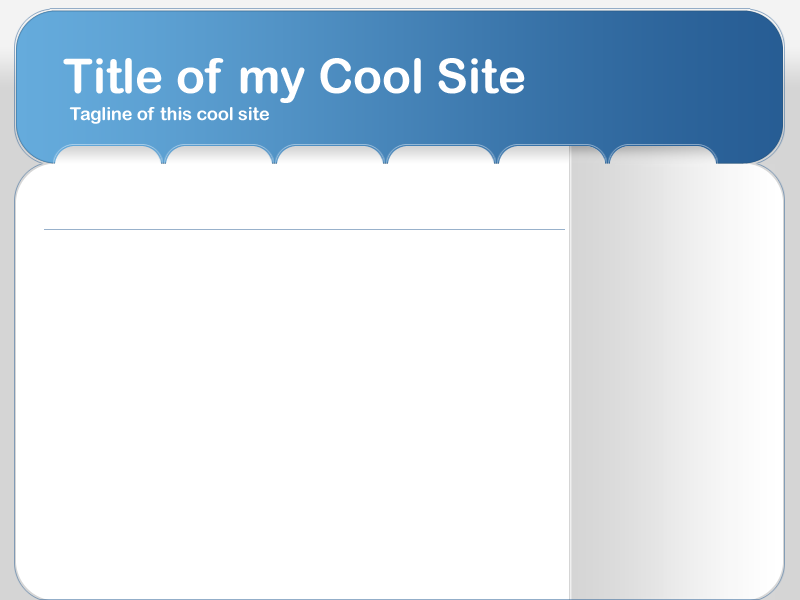
<style>
.page{position:relative;width:800px;height:600px;background:#ffffff}
.page>*{position:absolute;margin:0}
.t1{font:48px "ArialRoundedMTBold";color:#ffffff}
.t2{font:18px "ArialRoundedMTBold";color:#ffffff}
</style>
<div class="page">
<p class="t1" style="left:63px;top:58px;width:462px;height:45px">Title of my Cool Site</p>
<p class="t2" style="left:69px;top:107px;width:200px;height:17px">Tagline of this cool site</p>
</div>
